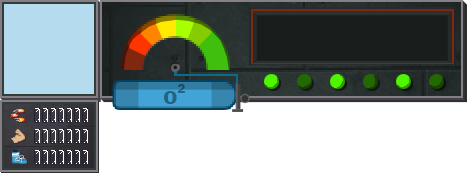
<style>
.page{position:relative;width:467px;height:173px;background:#ffffff}
.page>*{position:absolute;margin:0}
.t1{font:20.1px "FranklinGothic-DemiCond";color:#256383;scale:1.28 1}
.t2{font:12.8px "FranklinGothic-DemiCond";color:#256383;scale:1.28 1}
</style>
<div class="page">
<p class="t1" style="left:164px;top:84px;width:21px;height:20px">O<span class="t2">2</span></p>
</div>
